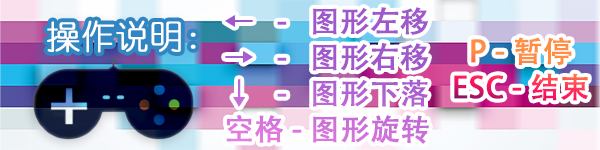
<style>
.page{position:relative;width:600px;height:150px}
.page>*{position:absolute;margin:0}
.t1{font:29.3px/36px "AdobeHeitiStd-Regular";font-weight:bold}
.t2{font:33.3px "YouYuan";color:#ffffff;font-weight:bold}
</style>
<div class="page">
<p class="t1" style="left:225px;top:7px;width:204px;height:137px;text-align:center">←   -   图形左移<br>→   -   图形右移<br>↓   -   图形下落<br>空格 - 图形旋转</p>
<p class="t2" style="left:47px;top:20px;width:149px;height:33px">操作说明：</p>
<p class="t1" style="left:454px;top:37px;width:134px;height:64px;text-align:center">Ｐ - 暂停<br>ESC - 结束</p>
</div>
